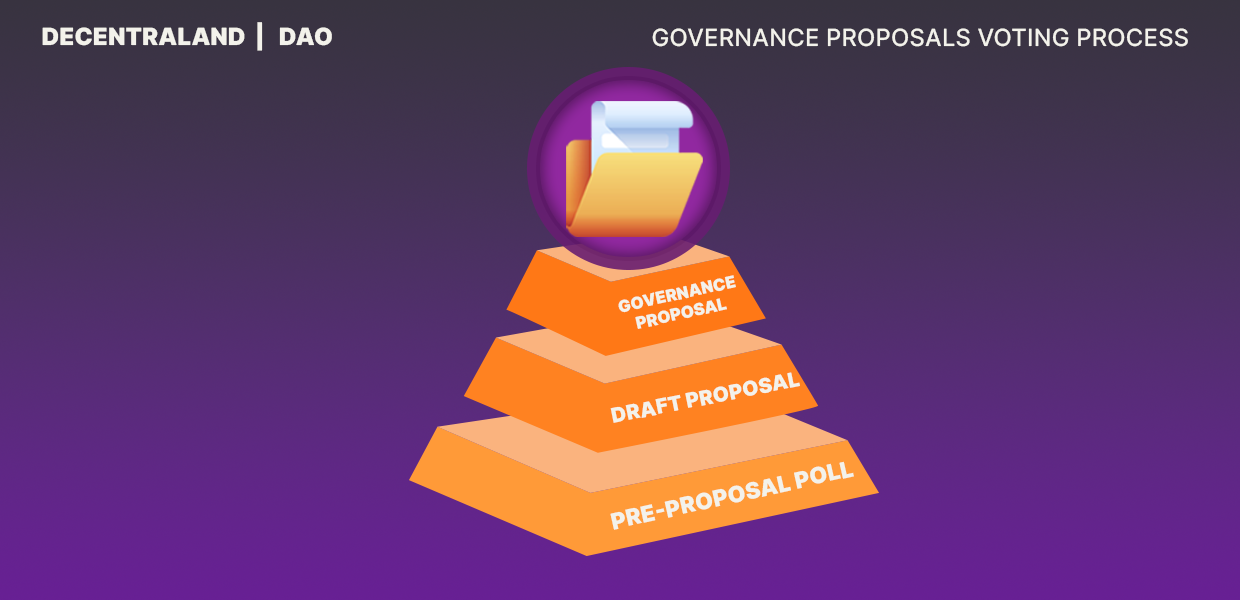
<style>
.page{position:relative;width:1240px;height:600px}
.page>*{position:absolute;margin:0}
.t1{font:23.8px "Inter-Black";color:#f3f2eb;text-transform:uppercase}
.t2{font:23.8px "Inter-Medium";color:#f3f2eb;text-transform:uppercase}
.t3{font:16.3px "Inter-Black";color:#f3f2eb;text-transform:uppercase}
.t4{font:20.4px "Inter-Black";color:#f3f2eb;text-transform:uppercase}
.t5{font:22.6px "Inter-Black";color:#f3f2eb;text-transform:uppercase}
</style>
<div class="page">
<p class="t1" style="left:42px;top:22px;width:290px;height:29px">decentraland  |   DAO</p>
<p class="t2" style="left:652px;top:28px;width:536px;height:19px">Governance proposals voting process</p>
<p class="t3" style="left:618px;top:275px;width:118px;height:54px;rotate:-13deg">Governance ProposaL</p>
<p class="t4" style="left:610px;top:372px;width:190px;height:51px;rotate:-11deg">Draft Proposal</p>
<p class="t5" style="left:610px;top:461px;width:244px;height:69px;rotate:-13deg">Pre-Proposal Poll</p>
</div>
